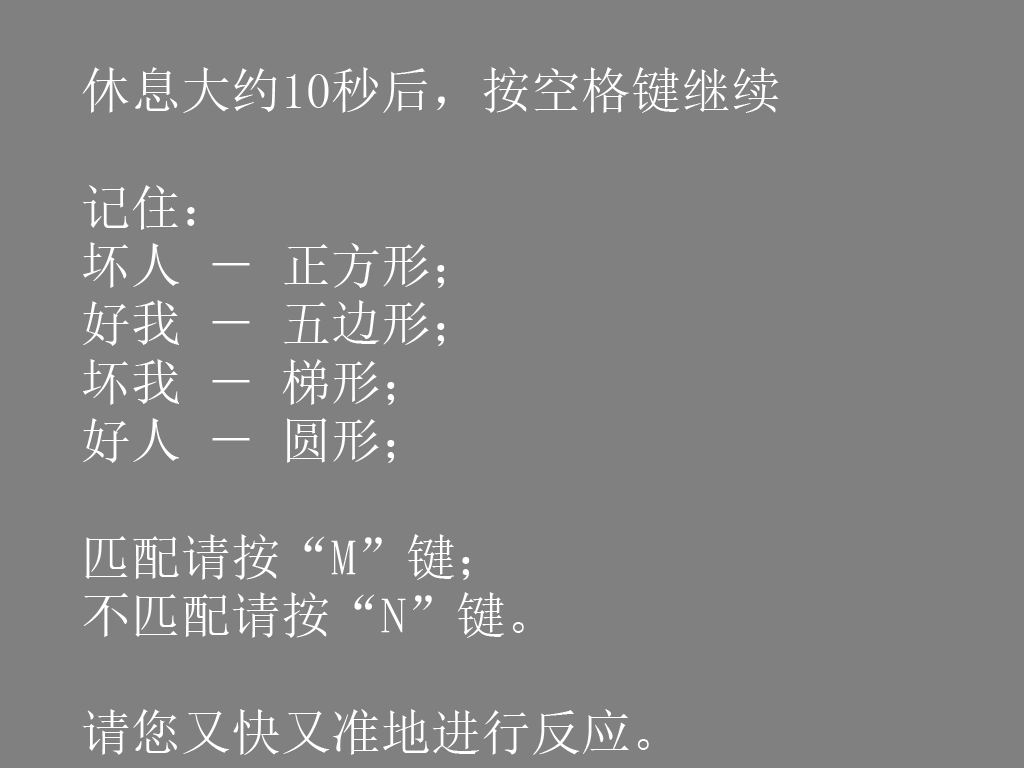
<style>
.page{position:relative;width:1024px;height:768px;background:#808080}
.page>*{position:absolute;margin:0}
.t1{font:50px/58.3px "SimSun";color:#ffffff}
</style>
<div class="page">
<p class="t1" style="left:82px;top:67px;width:697px;height:688px">休息大约10秒后，按空格键继续<br><br>记住： <br>坏人 － 正方形；<br>好我 － 五边形；<br>坏我 － 梯形；<br>好人 － 圆形；<br><br>匹配请按“M”键；<br>不匹配请按“N”键。<br><br>请您又快又准地进行反应。</p>
</div>
